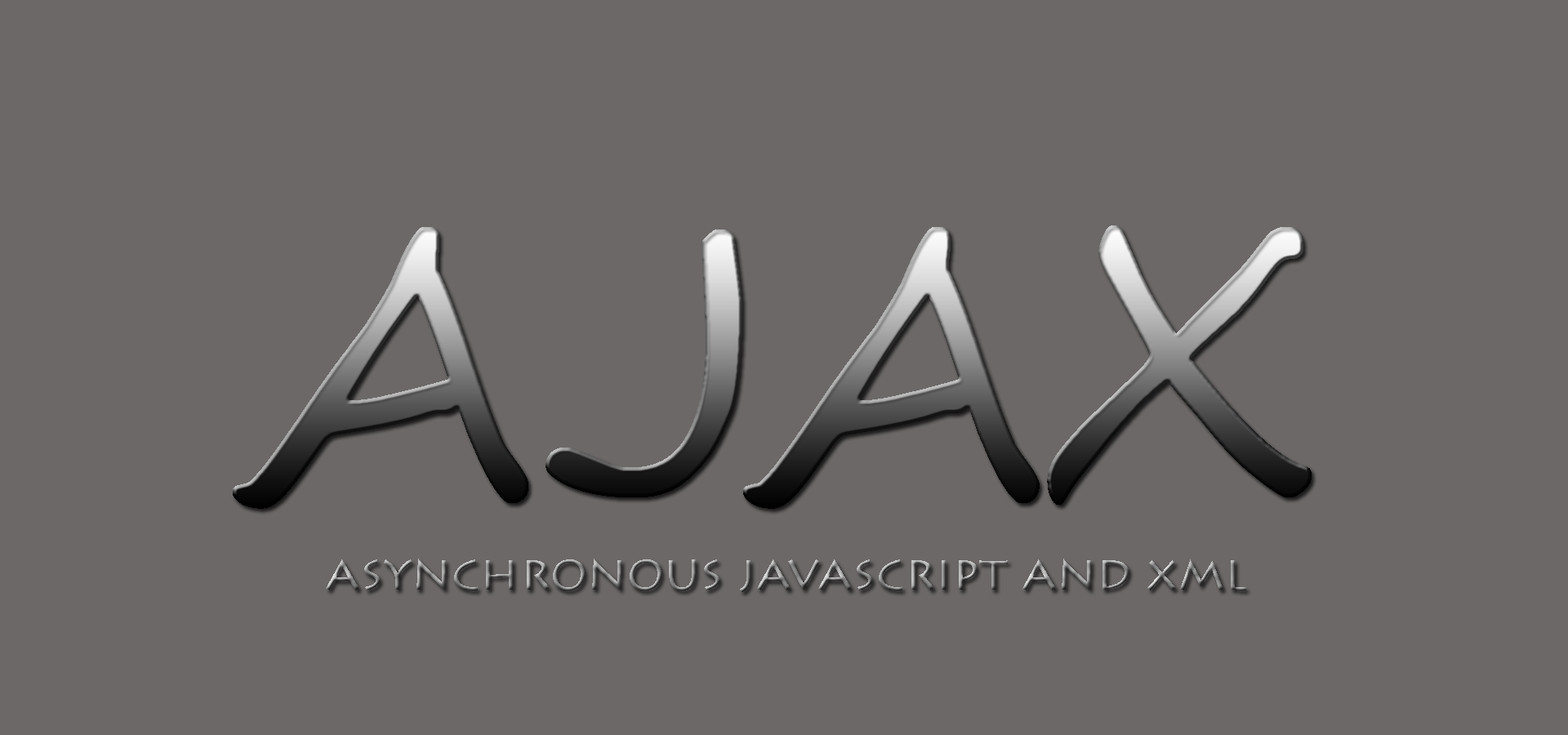
<style>
.page{position:relative;width:1568px;height:735px;background:#6c6868}
.page>*{position:absolute;margin:0}
.t1{font:49px "LithosPro-Regular"}
</style>
<div class="page">
<p class="t1" style="left:326px;top:559px;width:920px;height:33px">asynchronous javascript and xml</p>
</div>
